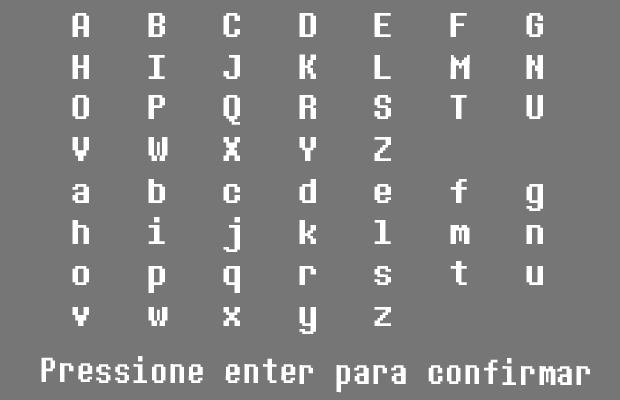
<style>
.page{position:relative;width:620px;height:400px;background:#767676}
.page>*{position:absolute;margin:0}
.t1{font:36px "DeterminationMono";letter-spacing:0.45em;color:#ffffff}
.t2{font:36px "DeterminationMono";color:#ffffff;scale:0.85 1}
</style>
<div class="page">
<p class="t1" style="left:72px;top:13px;width:471px;height:24px">A B C D E F G</p>
<p class="t1" style="left:72px;top:54px;width:471px;height:25px">H I J K L M N</p>
<p class="t1" style="left:72px;top:95px;width:471px;height:30px">O P Q R S T U</p>
<p class="t1" style="left:72px;top:137px;width:319px;height:24px">V W X Y Z</p>
<p class="t1" style="left:72px;top:179px;width:471px;height:32px">a b c d e f g</p>
<p class="t1" style="left:72px;top:217px;width:471px;height:35px">h i j k l m n</p>
<p class="t1" style="left:72px;top:261px;width:471px;height:32px">o p q r s t u</p>
<p class="t1" style="left:72px;top:307px;width:319px;height:27px">v w x y z</p>
<p class="t2" style="left:41px;top:356px;width:549px;height:37px">Pressione enter para confirmar</p>
</div>
